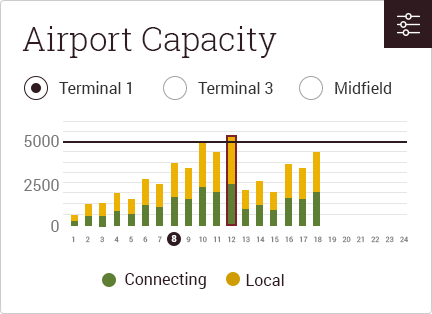
<style>
.page{position:relative;width:432px;height:314px;background:#ffffff}
.page>*{position:absolute;margin:0}
.t1{font:33px "RobotoSlab-Light";color:#2f1b1f}
.t2{font:16px "Roboto-Regular";color:#333333}
.t3{font:16px "Roboto-Regular";color:#767676}
.t4{font:7.2px "Roboto-Regular";color:#767676}
.t5{font:7.2px "Roboto-Regular"}
.t6{font:9px "Roboto-Bold";color:#ffffff}
.t7{font:16px "Roboto-Regular";color:#2f1b1f}
</style>
<div class="page">
<p class="t1" style="left:22px;top:26px;width:255px;height:32px">Airport Capacity</p>
<p class="t2" style="left:59px;top:81px;width:72px;height:13px">Terminal 1</p>
<p class="t2" style="left:198px;top:81px;width:75px;height:13px">Terminal 3</p>
<p class="t2" style="left:335px;top:81px;width:56px;height:13px">Midfield</p>
<p class="t3" style="left:24px;top:135px;width:35px;height:12px">5000</p>
<p class="t3" style="left:24px;top:179px;width:35px;height:12px">2500</p>
<p class="t3" style="left:51px;top:220px;width:8px;height:12px">0</p>
<p class="t4" style="left:72px;top:236px;width:3px;height:7px">1</p>
<p class="t5" style="left:86px;top:236px;width:4px;height:7px">2</p>
<p class="t4" style="left:100px;top:236px;width:4px;height:7px">3</p>
<p class="t4" style="left:114px;top:236px;width:5px;height:7px">4</p>
<p class="t5" style="left:129px;top:236px;width:4px;height:7px">5</p>
<p class="t4" style="left:143px;top:236px;width:5px;height:7px">6</p>
<p class="t4" style="left:158px;top:236px;width:4px;height:7px">7</p>
<p class="t6" style="left:171px;top:235px;width:6px;height:7px">8</p>
<p class="t4" style="left:186px;top:236px;width:5px;height:7px">9</p>
<p class="t4" style="left:199px;top:236px;width:8px;height:7px">10</p>
<p class="t4" style="left:213px;top:236px;width:7px;height:7px">11</p>
<p class="t4" style="left:228px;top:236px;width:8px;height:7px">12</p>
<p class="t5" style="left:242px;top:236px;width:8px;height:7px">13</p>
<p class="t4" style="left:256px;top:236px;width:9px;height:7px">14</p>
<p class="t4" style="left:271px;top:236px;width:8px;height:7px">15</p>
<p class="t4" style="left:285px;top:236px;width:8px;height:7px">16</p>
<p class="t4" style="left:299px;top:236px;width:9px;height:7px">17</p>
<p class="t4" style="left:314px;top:236px;width:8px;height:7px">18</p>
<p class="t4" style="left:328px;top:236px;width:9px;height:7px">19</p>
<p class="t4" style="left:342px;top:236px;width:9px;height:7px">20</p>
<p class="t5" style="left:357px;top:236px;width:7px;height:7px">21</p>
<p class="t4" style="left:371px;top:236px;width:9px;height:7px">22</p>
<p class="t4" style="left:385px;top:236px;width:9px;height:7px">23</p>
<p class="t4" style="left:400px;top:236px;width:9px;height:7px">24</p>
<p class="t7" style="left:125px;top:272px;width:81px;height:17px">Connecting</p>
<p class="t7" style="left:246px;top:274px;width:38px;height:12px">Local</p>
</div>
